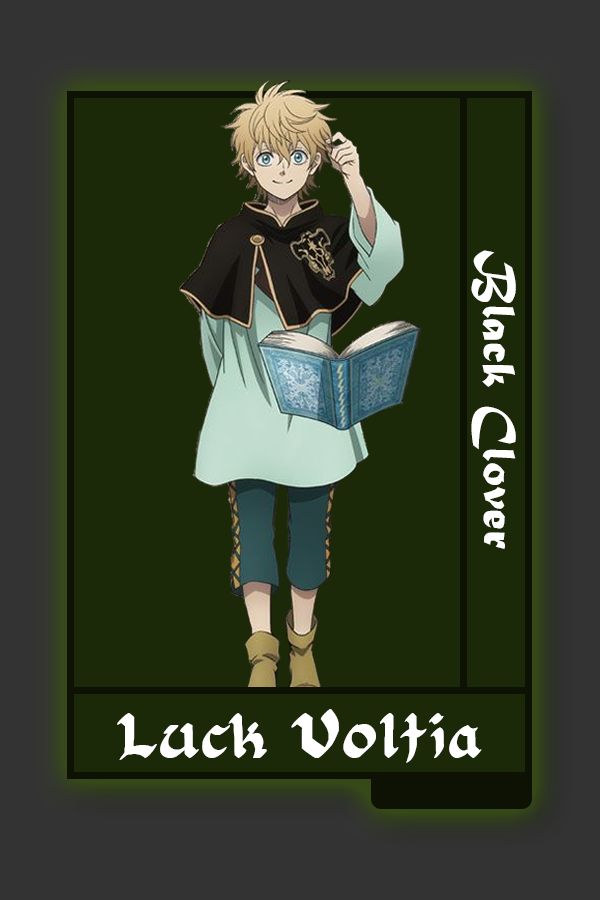
<style>
.page{position:relative;width:600px;height:900px;background:#1b2908}
.page>*{position:absolute;margin:0}
.t1{font:48.8px "MaturaMTScriptCapitals";color:#ffffff}
.t2{font:54.8px "FloranteatLaura";color:#ffffff}
</style>
<div class="page">
<p class="t1" style="left:471px;top:250px;width:45px;height:299px;rotate:90deg">Black Clover</p>
<p class="t2" style="left:117px;top:709px;width:365px;height:54px">Luck Voltia</p>
</div>
